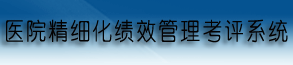
<style>
.page{position:relative;width:293px;height:65px}
.page>*{position:absolute;margin:0}
.t1{font:24px "YouYuan";letter-spacing:0.1em;color:#070202;scale:0.83 1}
</style>
<div class="page">
<p class="t1" style="left:6px;top:19px;width:282px;height:24px">医院精细化绩效管理考评系统</p>
</div>
